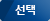
<style>
.page{position:relative;width:50px;height:21px}
.page>*{position:absolute;margin:0}
.t1{font:10.5px "MalgunGothicBold";color:#ffffff}
</style>
<div class="page">
<p class="t1" style="left:15px;top:5px;width:20px;height:10px">선택</p>
</div>
